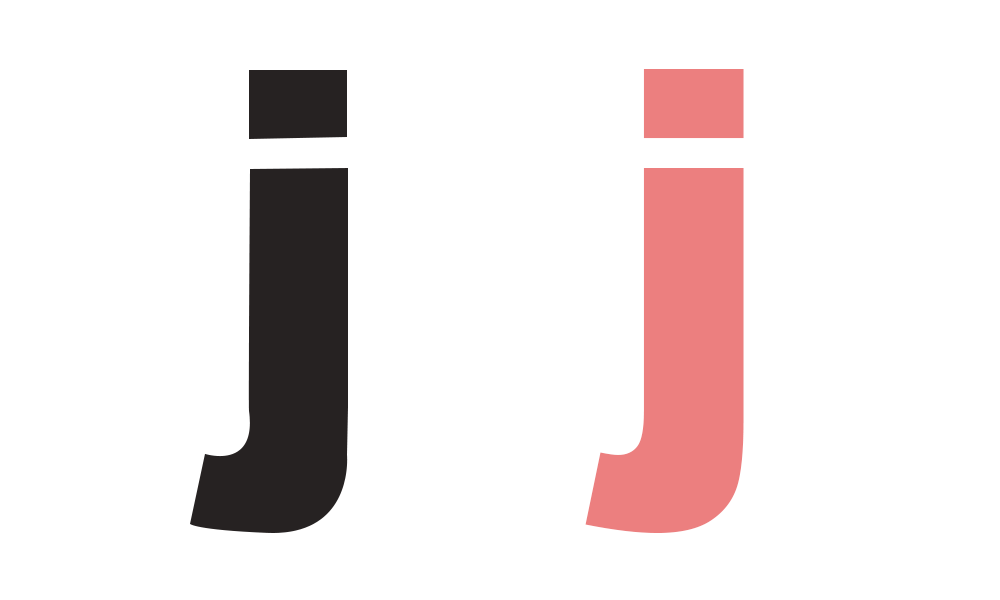
<style>
.page{position:relative;width:1000px;height:600px;background:#ffffff}
.page>*{position:absolute;margin:0}
.t1{font:500px "Arial-Black";color:#ec7f7f}
</style>
<div class="page">
<p class="t1" style="left:585px;top:69px;width:159px;height:464px">j</p>
</div>
